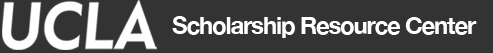
<style>
.page{position:relative;width:493px;height:53px;background:#333333}
.page>*{position:absolute;margin:0}
.t1{font:24px "HelveticaNeue-Bold";letter-spacing:-0.05em;color:#ffffff}
</style>
<div class="page">
<p class="t1" style="left:172px;top:16px;width:305px;height:22px">Scholarship Resource Center</p>
</div>
